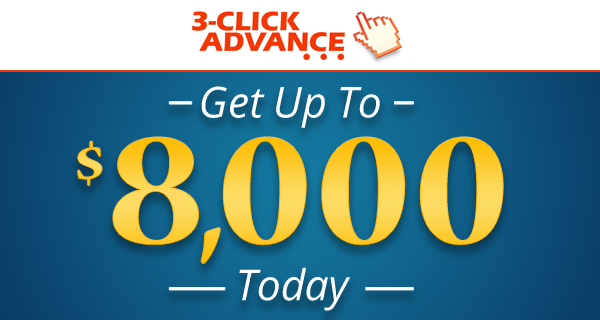
<style>
.page{position:relative;width:600px;height:320px}
.page>*{position:absolute;margin:0}
.t1{font:42.8px "OpenSans-Italic";letter-spacing:-0.01em;color:#ffffff}
.t2{font:175.8px "NuevaStd-Bold";letter-spacing:-0.01em;text-transform:uppercase}
.t3{font:62.8px "NuevaStd-Bold";letter-spacing:-0.01em;color:#fcd756;text-transform:uppercase}
</style>
<div class="page">
<p class="t1" style="left:201px;top:86px;width:179px;height:42px">Get Up To</p>
<p class="t2" style="left:113px;top:137px;width:390px;height:127px">8,000</p>
<p class="t3" style="left:78px;top:141px;width:24px;height:45px">$</p>
<p class="t1" style="left:239px;top:267px;width:112px;height:44px">Today</p>
</div>
